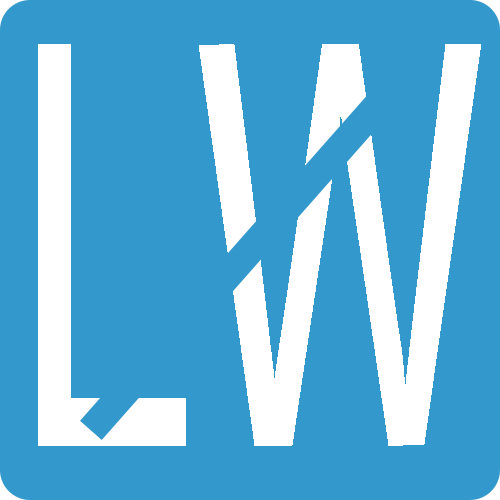
<style>
.page{position:relative;width:500px;height:500px;background:#3399cc}
.page>*{position:absolute;margin:0}
.t1{font:500px "FZLTZHK--GBK1-0";color:#ffffff;scale:0.54 1}
</style>
<div class="page">
<p class="t1" style="left:38px;top:44px;width:443px;height:402px">LW</p>
</div>
